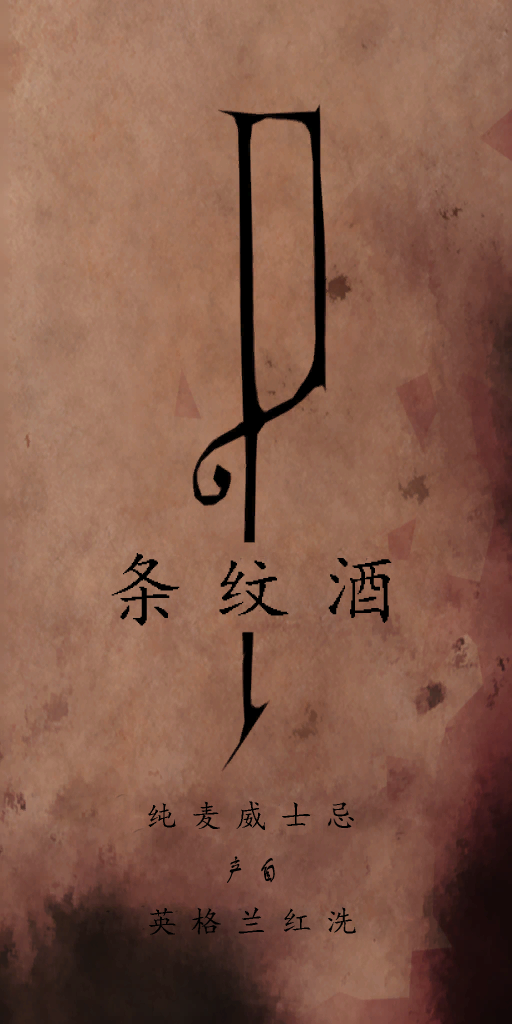
<style>
.page{position:relative;width:512px;height:1024px}
.page>*{position:absolute;margin:0}
.t1{font:80px "¿¬Ìå";letter-spacing:0.35em;color:#000000}
.t2{font:32px "¿¬Ìå";letter-spacing:0.4em;color:#000000}
.t3{font:29.3px "FZSTK--GBK1-0";letter-spacing:0.4em;color:#000000;scale:0.8 1}
</style>
<div class="page">
<p class="t1" style="left:111px;top:553px;width:281px;height:73px">条纹酒</p>
<p class="t2" style="left:148px;top:801px;width:206px;height:29px">纯麦威士忌</p>
<p class="t3" style="left:227px;top:856px;width:48px;height:27px">产自</p>
<p class="t2" style="left:149px;top:907px;width:207px;height:28px">英格兰红洗</p>
</div>
